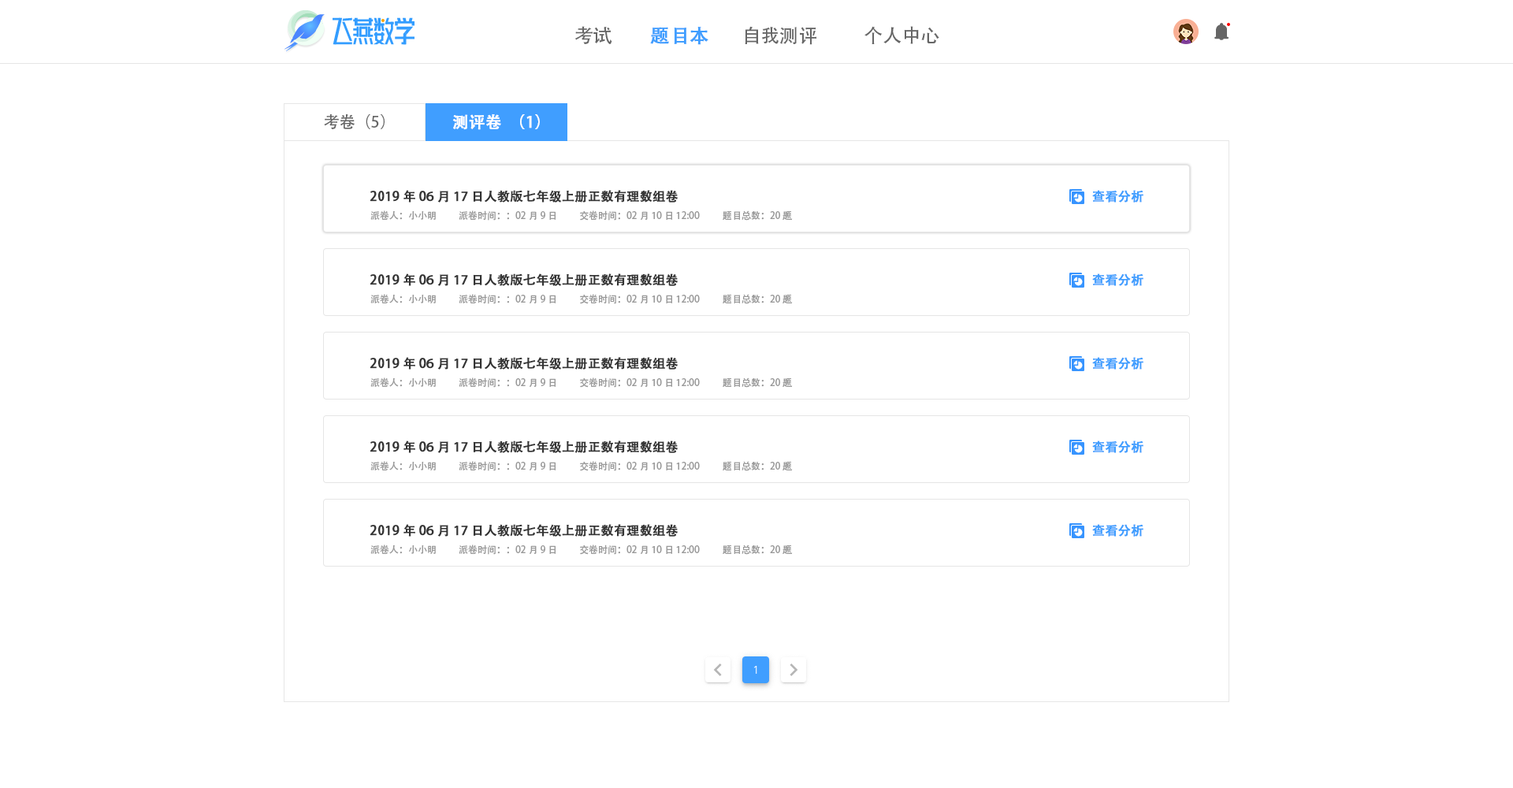
<style>
.page{position:relative;width:1513px;height:788px;background:#ffffff}
.page>*{position:absolute;margin:0}
.t1{font:18.9px "AdobeHeitiStd-Regular";color:#666666}
.t2{font:18.9px "AdobeHeitiStd-Regular";color:#409eff;font-weight:bold}
.t3{font:15.8px "AdobeHeitiStd-Regular";color:#ffffff;font-weight:bold}
.t4{font:15.8px "AdobeHeitiStd-Regular";color:#666666}
.t5{font:12.6px "AdobeHeitiStd-Regular";color:#333333;font-weight:bold}
.t6{font:12.6px "AdobeHeitiStd-Regular";color:#409eff;font-weight:bold}
.t7{font:9.5px "AdobeHeitiStd-Regular";color:#999999}
</style>
<div class="page">
<p class="t1" style="left:575px;top:26px;width:37px;height:18px">考试</p>
<p class="t2" style="left:650px;top:27px;width:58px;height:18px">题目本</p>
<p class="t1" style="left:745px;top:26px;width:71px;height:19px">自我测评</p>
<p class="t1" style="left:865px;top:26px;width:74px;height:18px">个人中心</p>
<p class="t3" style="left:452px;top:113px;width:88px;height:17px">测评卷（1）</p>
<p class="t4" style="left:324px;top:114px;width:61px;height:15px">考卷（5）</p>
<p class="t5" style="left:370px;top:190px;width:309px;height:13px">2019年06月17日人教版七年级上册正数有理数组卷</p>
<p class="t6" style="left:1092px;top:190px;width:51px;height:13px">查看分析</p>
<p class="t7" style="left:370px;top:210px;width:66px;height:10px">派卷人：小小明</p>
<p class="t7" style="left:459px;top:210px;width:97px;height:11px">派卷时间：：02月9日</p>
<p class="t7" style="left:580px;top:210px;width:120px;height:11px">交卷时间：02月10日 12:00</p>
<p class="t7" style="left:723px;top:210px;width:70px;height:11px">题目总数：20题</p>
<p class="t5" style="left:370px;top:273px;width:309px;height:13px">2019年06月17日人教版七年级上册正数有理数组卷</p>
<p class="t6" style="left:1092px;top:273px;width:51px;height:13px">查看分析</p>
<p class="t7" style="left:370px;top:294px;width:66px;height:9px">派卷人：小小明</p>
<p class="t7" style="left:459px;top:294px;width:97px;height:10px">派卷时间：：02月9日</p>
<p class="t7" style="left:580px;top:294px;width:120px;height:10px">交卷时间：02月10日 12:00</p>
<p class="t7" style="left:723px;top:294px;width:70px;height:10px">题目总数：20题</p>
<p class="t5" style="left:370px;top:357px;width:309px;height:13px">2019年06月17日人教版七年级上册正数有理数组卷</p>
<p class="t6" style="left:1092px;top:357px;width:51px;height:13px">查看分析</p>
<p class="t7" style="left:370px;top:377px;width:66px;height:10px">派卷人：小小明</p>
<p class="t7" style="left:459px;top:377px;width:97px;height:11px">派卷时间：：02月9日</p>
<p class="t7" style="left:580px;top:377px;width:120px;height:11px">交卷时间：02月10日 12:00</p>
<p class="t7" style="left:723px;top:377px;width:70px;height:11px">题目总数：20题</p>
<p class="t5" style="left:370px;top:441px;width:309px;height:12px">2019年06月17日人教版七年级上册正数有理数组卷</p>
<p class="t6" style="left:1092px;top:441px;width:51px;height:12px">查看分析</p>
<p class="t7" style="left:370px;top:461px;width:66px;height:9px">派卷人：小小明</p>
<p class="t7" style="left:459px;top:461px;width:97px;height:10px">派卷时间：：02月9日</p>
<p class="t7" style="left:580px;top:461px;width:120px;height:10px">交卷时间：02月10日 12:00</p>
<p class="t7" style="left:723px;top:461px;width:70px;height:10px">题目总数：20题</p>
<p class="t5" style="left:370px;top:524px;width:309px;height:13px">2019年06月17日人教版七年级上册正数有理数组卷</p>
<p class="t6" style="left:1092px;top:524px;width:51px;height:13px">查看分析</p>
<p class="t7" style="left:370px;top:545px;width:66px;height:9px">派卷人：小小明</p>
<p class="t7" style="left:459px;top:545px;width:97px;height:10px">派卷时间：：02月9日</p>
<p class="t7" style="left:580px;top:545px;width:120px;height:10px">交卷时间：02月10日 12:00</p>
<p class="t7" style="left:723px;top:545px;width:70px;height:10px">题目总数：20题</p>
</div>
